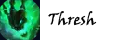
<style>
.page{position:relative;width:140px;height:40px;background:#ffffff}
.page>*{position:absolute;margin:0}
.t1{font:16px "VinerHandITC";color:#000000}
</style>
<div class="page">
<p class="t1" style="left:48px;top:11px;width:49px;height:15px">Thresh</p>
</div>
